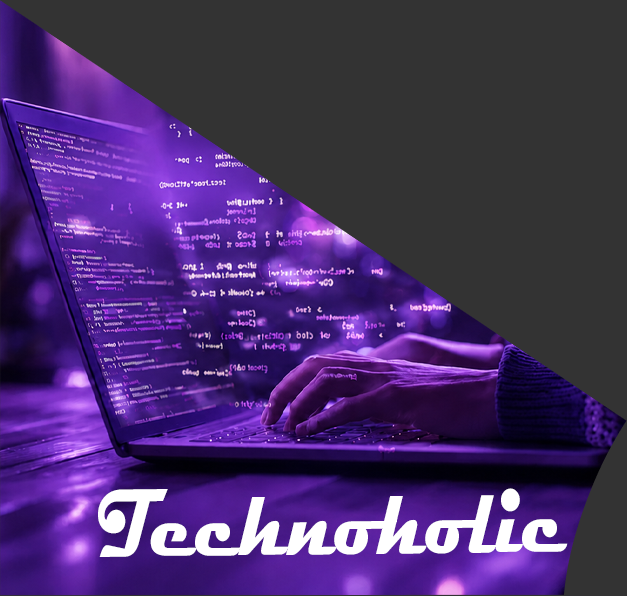
<style>
.page{position:relative;width:627px;height:596px;background:#333333}
.page>*{position:absolute;margin:0}
.t1{font:97.8px "Magneto-Bold";color:#ffffff;scale:0.74 1}
</style>
<div class="page">
<p class="t1" style="left:98px;top:488px;width:470px;height:69px;rotate:-1deg">Technoholic</p>
</div>
